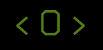
<style>
.page{position:relative;width:103px;height:50px;background:#000000}
.page>*{position:absolute;margin:0}
.t1{font:36px "Bender";color:#567c1b}
</style>
<div class="page">
<p class="t1" style="left:16px;top:10px;width:69px;height:26px">&lt; O &gt;</p>
</div>
